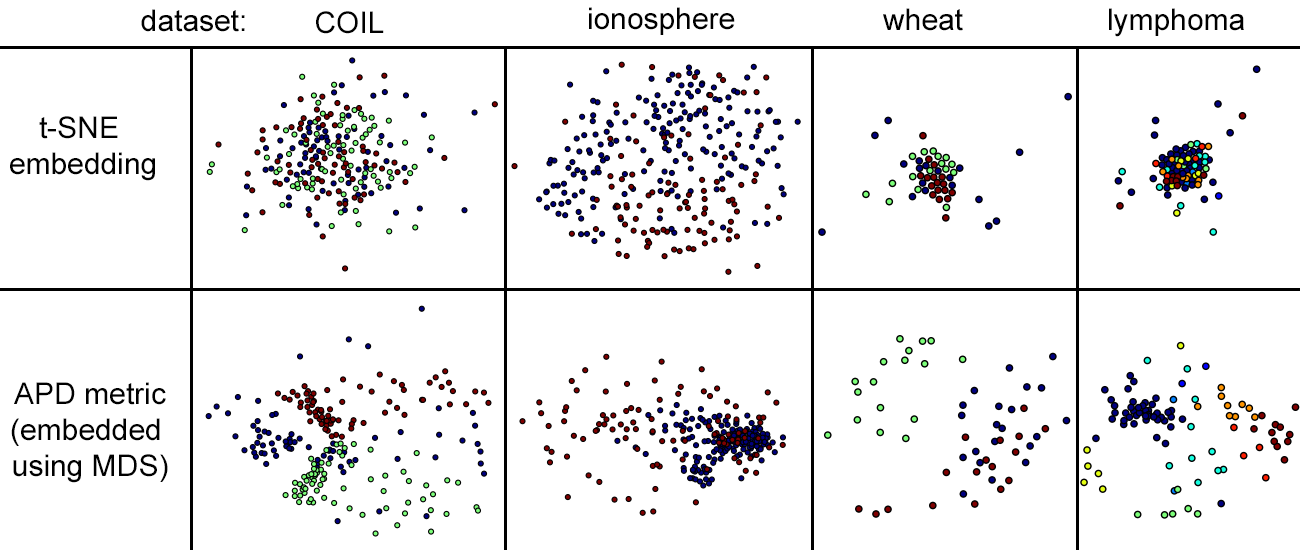
<style>
.page{position:relative;width:1300px;height:550px;background:#ffffff}
.page>*{position:absolute;margin:0}
.t1{font:30px "ArialMT";color:#000000}
</style>
<div class="page">
<p class="t1" style="left:141px;top:9px;width:104px;height:23px">dataset:</p>
<p class="t1" style="left:316px;top:11px;width:68px;height:23px">COIL</p>
<p class="t1" style="left:589px;top:7px;width:146px;height:28px">ionosphere</p>
<p class="t1" style="left:883px;top:8px;width:80px;height:23px">wheat</p>
<p class="t1" style="left:1109px;top:8px;width:135px;height:29px">lymphoma</p>
<p class="t1" style="left:10px;top:116px;width:145px;height:65px;text-align:center">t-SNE <br>embedding</p>
<p class="t1" style="left:11px;top:382px;width:157px;height:101px;text-align:center">APD metric<br>(embedded <br>using MDS)</p>
</div>
